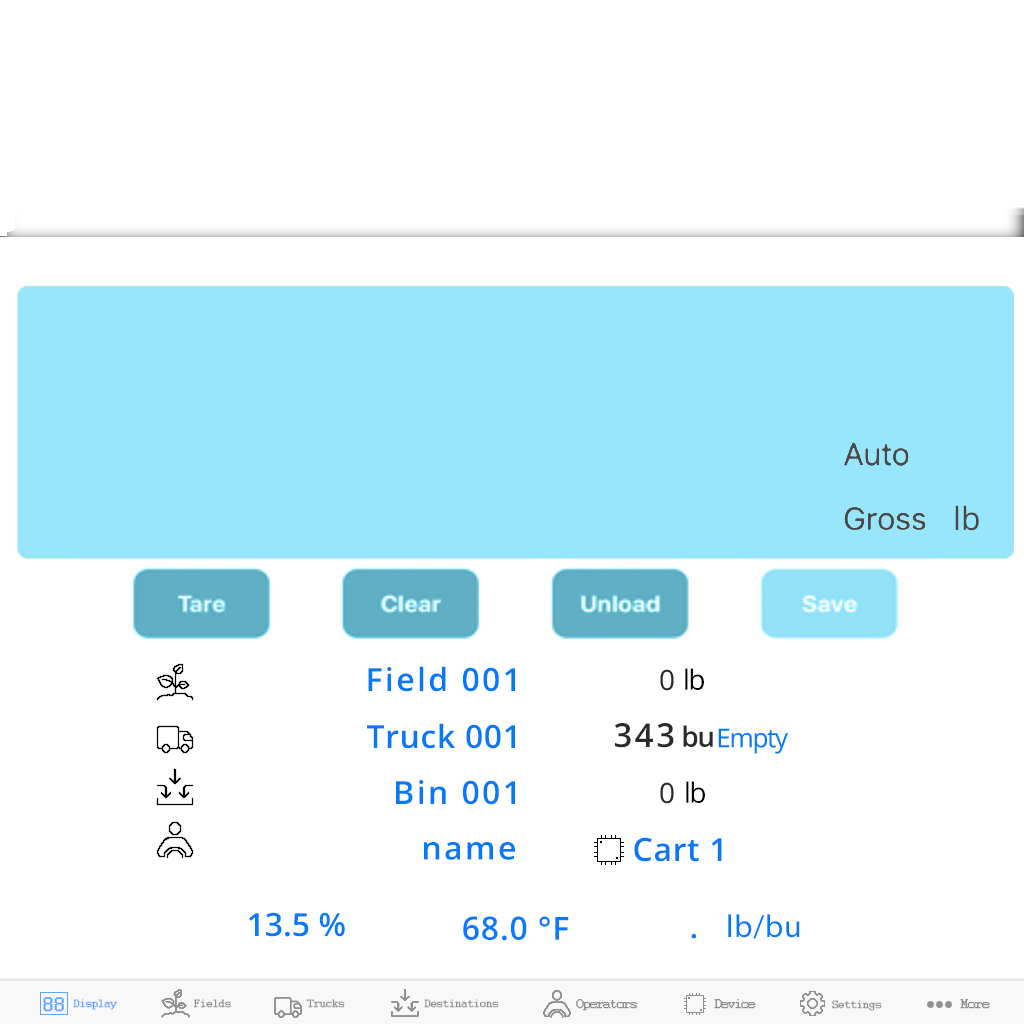
<style>
.page{position:relative;width:1024px;height:1024px;background:#ffffff}
.page>*{position:absolute;margin:0}
.t1{font:32px "OpenSans";letter-spacing:-0.005em;color:#4b4648}
.t2{font:32px "OpenSans-Semibold";letter-spacing:0.075em;color:#0778fa}
.t3{font:28px "OpenSans";letter-spacing:-0.05em;color:#000000}
.t4{font:32px "OpenSans-Semibold";letter-spacing:0.02em;color:#0778fa}
.t5{font:33px "OpenSans-Semibold";letter-spacing:0.075em;color:#2c2b2c}
.t6{font:28px "OpenSans-Semibold";letter-spacing:-0.05em;color:#2c2b2c}
.t7{font:32px "OpenSans-Semibold";color:#077afe}
.t8{font:32px "OpenSans-Semibold";letter-spacing:0.025em;color:#077afe}
.t9{font:32px "MyriadPro-Regular";letter-spacing:0.025em;color:#0778fa}
.t10{font:30px "OpenSans-Semibold";letter-spacing:0.075em;color:#0778fa}
.t11{font:12px "Courier";letter-spacing:-0.05em;color:#5ea4fc;font-weight:bold}
.t12{font:12px "Courier";letter-spacing:-0.05em;color:#8f8f8f;font-weight:bold}
.t13{font:13px "Courier";letter-spacing:-0.05em;color:#8f8f8f;font-weight:bold}
.t14{font:14px "Courier";letter-spacing:-0.05em;color:#8f8f8f;font-weight:bold}
</style>
<div class="page">
<p class="t1" style="left:955px;top:505px;width:24px;height:26px">lb</p>
<p class="t2" style="left:368px;top:666px;width:147px;height:26px">Field 001</p>
<p class="t3" style="left:685px;top:668px;width:19px;height:22px">lb</p>
<p class="t4" style="left:367px;top:723px;width:148px;height:26px">Truck 001</p>
<p class="t5" style="left:615px;top:723px;width:59px;height:25px">343</p>
<p class="t6" style="left:683px;top:725px;width:30px;height:22px">bu</p>
<p class="t2" style="left:396px;top:780px;width:119px;height:25px">Bin 001</p>
<p class="t3" style="left:686px;top:781px;width:19px;height:22px">lb</p>
<p class="t2" style="left:424px;top:842px;width:91px;height:18px">name</p>
<p class="t4" style="left:634px;top:837px;width:88px;height:25px">Cart 1</p>
<p class="t7" style="left:249px;top:912px;width:96px;height:25px">13.5 %</p>
<p class="t8" style="left:463px;top:916px;width:106px;height:25px">68.0 °F</p>
<p class="t9" style="left:728px;top:914px;width:72px;height:25px">lb/bu</p>
<p class="t10" style="left:691px;top:933px;width:6px;height:6px">.</p>
<p class="t11" style="left:73px;top:999px;width:44px;height:11px">Display</p>
<p class="t12" style="left:194px;top:999px;width:37px;height:9px">Fields</p>
<p class="t12" style="left:306px;top:999px;width:39px;height:9px">Trucks</p>
<p class="t12" style="left:424px;top:999px;width:75px;height:9px">Destinations</p>
<p class="t13" style="left:576px;top:999px;width:62px;height:12px">Operators</p>
<p class="t13" style="left:714px;top:999px;width:42px;height:10px">Device</p>
<p class="t12" style="left:832px;top:1000px;width:50px;height:11px">Settings</p>
<p class="t14" style="left:960px;top:999px;width:30px;height:10px">More</p>
</div>
